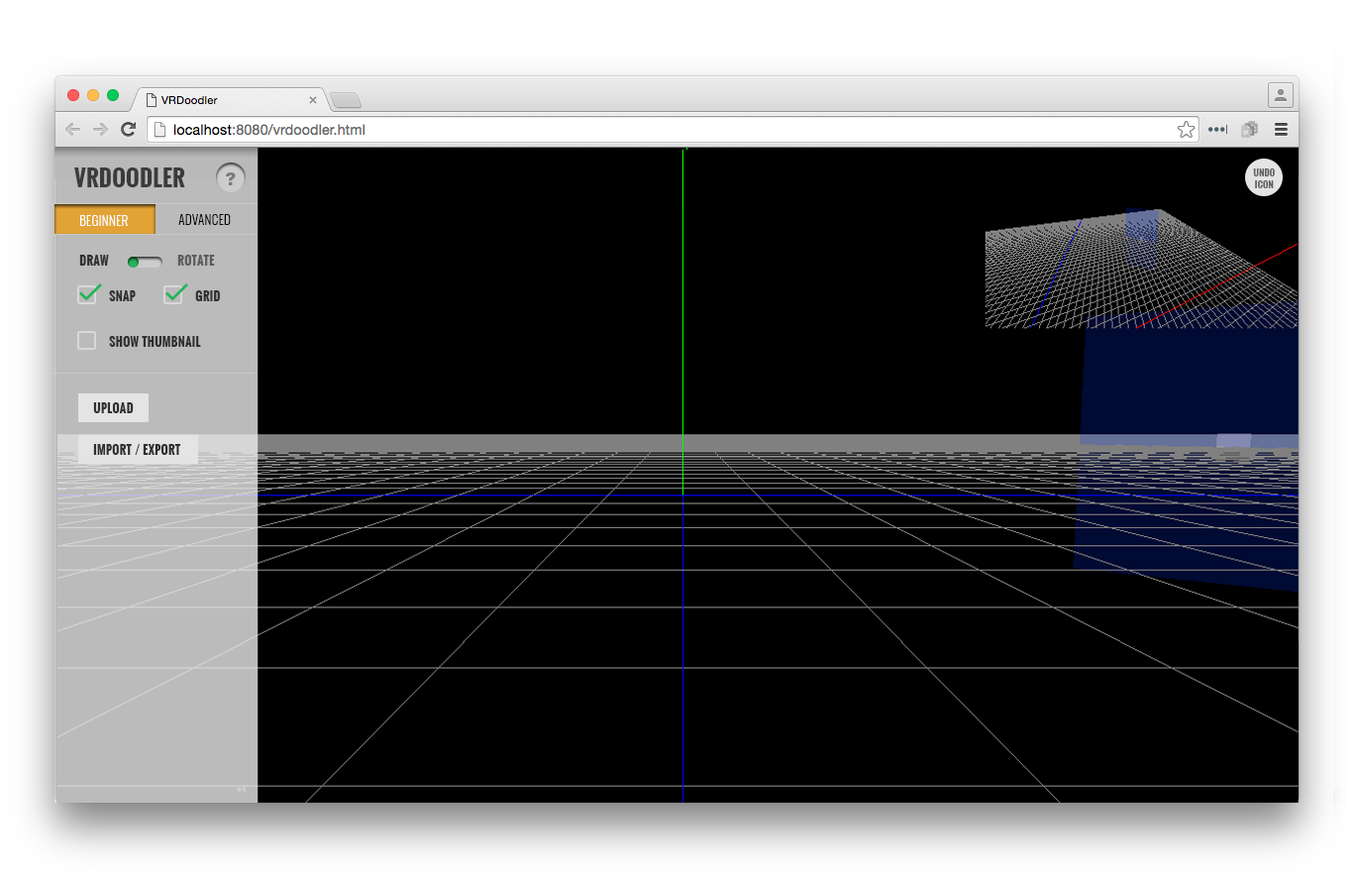
<style>
.page{position:relative;width:1354px;height:881px;background:#000000}
.page>*{position:absolute;margin:0}
.t1{font:22.8px "Oswald-Bold";letter-spacing:0.01em;color:#3b3b3b;text-transform:uppercase}
.t2{font:16.8px "HelveticaLTStd-Blk";letter-spacing:0.025em;color:#7a7a7a;text-transform:uppercase}
.t3{font:8.9px/11.9px "Oswald-Bold";letter-spacing:0.025em;color:#5f5f5f;text-transform:uppercase}
.t4{font:12.9px "Oswald-Light";letter-spacing:0.025em;color:#ffffff;text-transform:uppercase}
.t5{font:12.9px "Oswald-Light";letter-spacing:0.025em;color:#000000;text-transform:uppercase}
.t6{font:11.9px "Oswald-Bold";letter-spacing:0.025em;color:#303030;text-transform:uppercase}
.t7{font:11.9px "Oswald-Bold";letter-spacing:0.025em;color:#5f5f5f;text-transform:uppercase}
</style>
<div class="page">
<p class="t1" style="left:74px;top:167px;width:111px;height:20px">vrdoodler</p>
<p class="t2" style="left:226px;top:172px;width:10px;height:13px">?</p>
<p class="t3" style="left:1253px;top:168px;width:22px;height:20px;text-align:center">undo<br>icon</p>
<p class="t4" style="left:80px;top:215px;width:48px;height:11px">beginner</p>
<p class="t5" style="left:178px;top:214px;width:53px;height:11px">advanced</p>
<p class="t6" style="left:79px;top:255px;width:30px;height:10px">draw</p>
<p class="t7" style="left:177px;top:255px;width:38px;height:10px">rotate</p>
<p class="t6" style="left:109px;top:290px;width:27px;height:11px">snap</p>
<p class="t6" style="left:195px;top:290px;width:25px;height:11px">grid</p>
<p class="t6" style="left:109px;top:336px;width:92px;height:11px">show thumbnail</p>
<p class="t6" style="left:93px;top:402px;width:41px;height:11px">upload</p>
<p class="t6" style="left:93px;top:444px;width:88px;height:11px">import / export</p>
</div>
